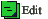
<style>
.page{position:relative;width:48px;height:19px;background:#ffffff}
.page>*{position:absolute;margin:0}
.t1{font:12px "TimesNewRomanPSMT";letter-spacing:-0.005em;color:#31372c}
</style>
<div class="page">
<p class="t1" style="left:21px;top:5px;width:21px;height:10px">Edit</p>
</div>
